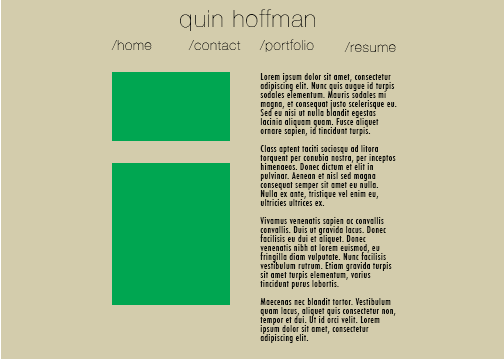
<style>
.page{position:relative;width:504px;height:360px;background:#d3ccac}
.page>*{position:absolute;margin:0}
.t1{font:24px "HelveticaNeue-UltraLight";letter-spacing:0.05em;color:#0b0c0a}
.t2{font:14px "HelveticaNeue-UltraLight";letter-spacing:0.05em}
.t3{font:14px "HelveticaNeue-UltraLight";letter-spacing:0.05em;color:#0b0c0a}
.t4{font:9px/9px "Futura-CondensedMedium";letter-spacing:0.05em;color:#0b0c0a}
</style>
<div class="page">
<p class="t1" style="left:180px;top:9px;width:135px;height:22px">quin hoffman</p>
<p class="t2" style="left:111px;top:40px;width:41px;height:10px">/home</p>
<p class="t2" style="left:188px;top:40px;width:53px;height:10px">/contact</p>
<p class="t3" style="left:259px;top:39px;width:55px;height:13px">/portfolio</p>
<p class="t3" style="left:344px;top:42px;width:52px;height:10px">/resume</p>
<p class="t4" style="left:260px;top:73px;width:137px;height:270px">Lorem ipsum dolor sit amet, consectetur adipiscing elit. Nunc quis augue id turpis sodales elementum. Mauris sodales mi magna, et consequat justo scelerisque eu. Sed eu nisi ut nulla blandit egestas lacinia aliquam quam. Fusce aliquet ornare sapien, id tincidunt turpis.<br><br>Class aptent taciti sociosqu ad litora torquent per conubia nostra, per inceptos himenaeos. Donec dictum et elit in pulvinar. Aenean et nisl sed magna consequat semper sit amet eu nulla. Nulla ex ante, tristique vel enim eu, ultricies ultrices ex.<br><br>Vivamus venenatis sapien ac convallis convallis. Duis ut gravida lacus. Donec facilisis eu dui et aliquet. Donec venenatis nibh at lorem euismod, eu fringilla diam vulputate. Nunc facilisis vestibulum rutrum. Etiam gravida turpis sit amet turpis elementum, varius tincidunt purus lobortis. <br><br>Maecenas nec blandit tortor. Vestibulum quam lacus, aliquet quis consectetur non, tempor et dui. Ut id orci velit. Lorem ipsum dolor sit amet, consectetur adipiscing elit.</p>
</div>
